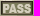
<style>
.page{position:relative;width:40px;height:16px}
.page>*{position:absolute;margin:0}
.t1{font:11.7px "Arial-Black";color:#d4cebc;scale:0.87 1}
</style>
<div class="page">
<p class="t1" style="left:3px;top:4px;width:28px;height:9px">PASS</p>
</div>
